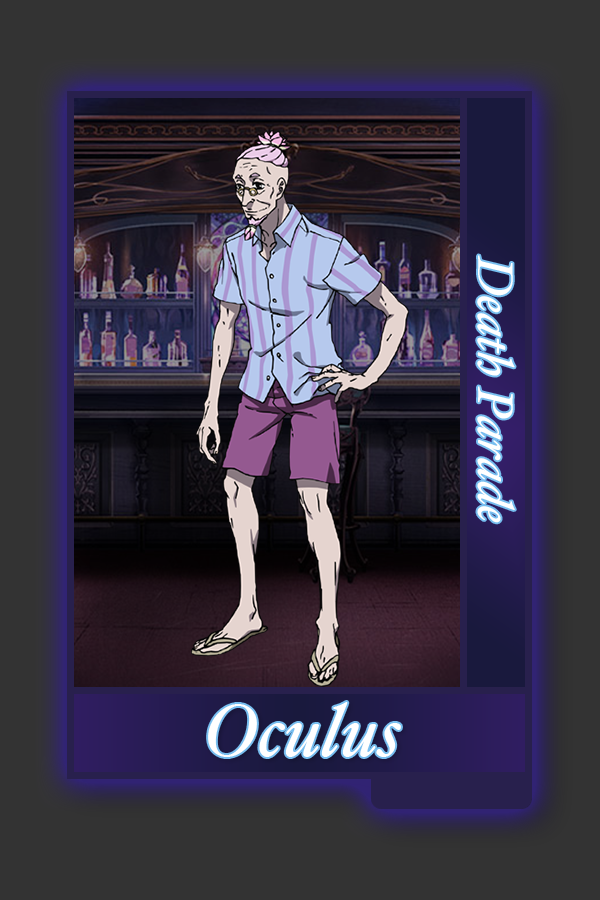
<style>
.page{position:relative;width:600px;height:900px;background:#333333}
.page>*{position:absolute;margin:0}
.t1{font:50px "HoeflerText-Italic";color:#ffffff}
.t2{font:75px "HoeflerText-Italic";color:#ffffff}
</style>
<div class="page">
<p class="t1" style="left:477px;top:255px;width:38px;height:268px;rotate:90deg">Death Parade</p>
<p class="t2" style="left:208px;top:702px;width:193px;height:55px">Oculus</p>
</div>
